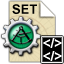
<style>
.page{position:relative;width:64px;height:64px;background:#ffffff}
.page>*{position:absolute;margin:0}
.t1{font:12.7px "Arial-BoldMT";color:#000000}
.t2{font:13.8px/12.5px "Arial-BoldMT";color:#ffffff}
</style>
<div class="page">
<p class="t1" style="left:12px;top:4px;width:25px;height:10px">SET</p>
<p class="t2" style="left:43px;top:38px;width:19px;height:23px;text-align:center">&lt;/&gt;<br>&lt;/&gt;</p>
</div>
